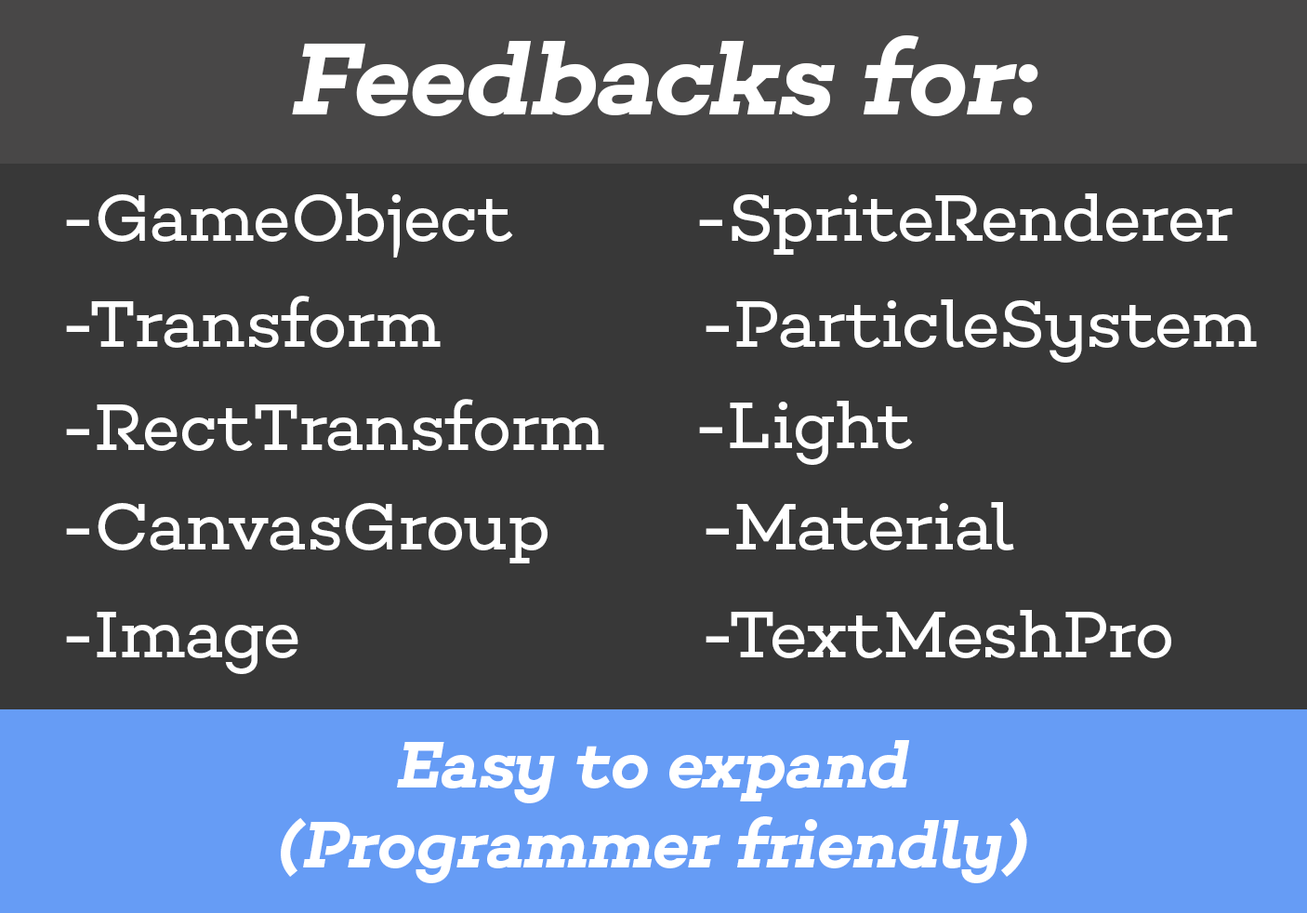
<style>
.page{position:relative;width:1307px;height:913px;background:#383838}
.page>*{position:absolute;margin:0}
.t1{font:103.5px "Choplin-SemiBoldItalic";color:#ffffff}
.t2{font:66.9px "Choplin-Book";color:#ffffff}
.t3{font:66.9px "Choplin-SemiBoldItalic";color:#ffffff}
</style>
<div class="page">
<p class="t1" style="left:292px;top:35px;width:746px;height:82px">Feedbacks for:</p>
<p class="t2" style="left:66px;top:193px;width:447px;height:64px">-GameObject</p>
<p class="t2" style="left:699px;top:193px;width:533px;height:62px">-SpriteRenderer</p>
<p class="t2" style="left:66px;top:296px;width:375px;height:52px">-Transform</p>
<p class="t2" style="left:705px;top:299px;width:551px;height:63px">-ParticleSystem</p>
<p class="t2" style="left:66px;top:399px;width:538px;height:52px">-RectTransform</p>
<p class="t2" style="left:699px;top:401px;width:214px;height:64px">-Light</p>
<p class="t2" style="left:66px;top:503px;width:481px;height:60px">-CanvasGroup</p>
<p class="t2" style="left:705px;top:502px;width:309px;height:48px">-Material</p>
<p class="t2" style="left:66px;top:611px;width:232px;height:63px">-Image</p>
<p class="t2" style="left:705px;top:610px;width:466px;height:48px">-TextMeshPro</p>
<p class="t3" style="left:281px;top:740px;width:746px;height:143px;text-align:center">Easy to expand <br>(Programmer friendly)</p>
</div>
